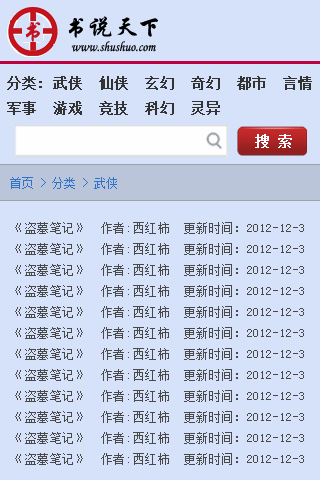
<style>
.page{position:relative;width:320px;height:480px;background:#d6e2fa}
.page>*{position:absolute;margin:0}
.t1{font:24px "STXingkai";letter-spacing:0.025em;color:#090909}
.t2{font:14px "STLiti";color:#090909;scale:0.9 1}
.t3{font:14px "SimSun";color:#ffffff;font-weight:bold}
.t4{font:12px "SimSun";color:#3072cb}
.t5{font:12px "SimSun";letter-spacing:0.05em;color:#494949}
</style>
<div class="page">
<p class="t1" style="left:68px;top:16px;width:90px;height:22px">书说天下</p>
<p class="t2" style="left:71px;top:41px;width:85px;height:11px">www.shushuo.com</p>
<p class="t3" style="left:255px;top:134px;width:37px;height:14px">搜 索</p>
<p class="t4" style="left:10px;top:177px;width:107px;height:12px">首页 &gt; 分类 &gt; 武侠</p>
<p class="t5" style="left:15px;top:222px;width:289px;height:243px">《盗墓笔记》  作者:西红柿  更新时间：2012-12-3<br>《盗墓笔记》  作者:西红柿  更新时间：2012-12-3<br>《盗墓笔记》  作者:西红柿  更新时间：2012-12-3<br>《盗墓笔记》  作者:西红柿  更新时间：2012-12-3<br>《盗墓笔记》  作者:西红柿  更新时间：2012-12-3<br>《盗墓笔记》  作者:西红柿  更新时间：2012-12-3<br>《盗墓笔记》  作者:西红柿  更新时间：2012-12-3<br>《盗墓笔记》  作者:西红柿  更新时间：2012-12-3<br>《盗墓笔记》  作者:西红柿  更新时间：2012-12-3<br>《盗墓笔记》  作者:西红柿  更新时间：2012-12-3<br>《盗墓笔记》  作者:西红柿  更新时间：2012-12-3<br>《盗墓笔记》  作者:西红柿  更新时间：2012-12-3</p>
</div>
